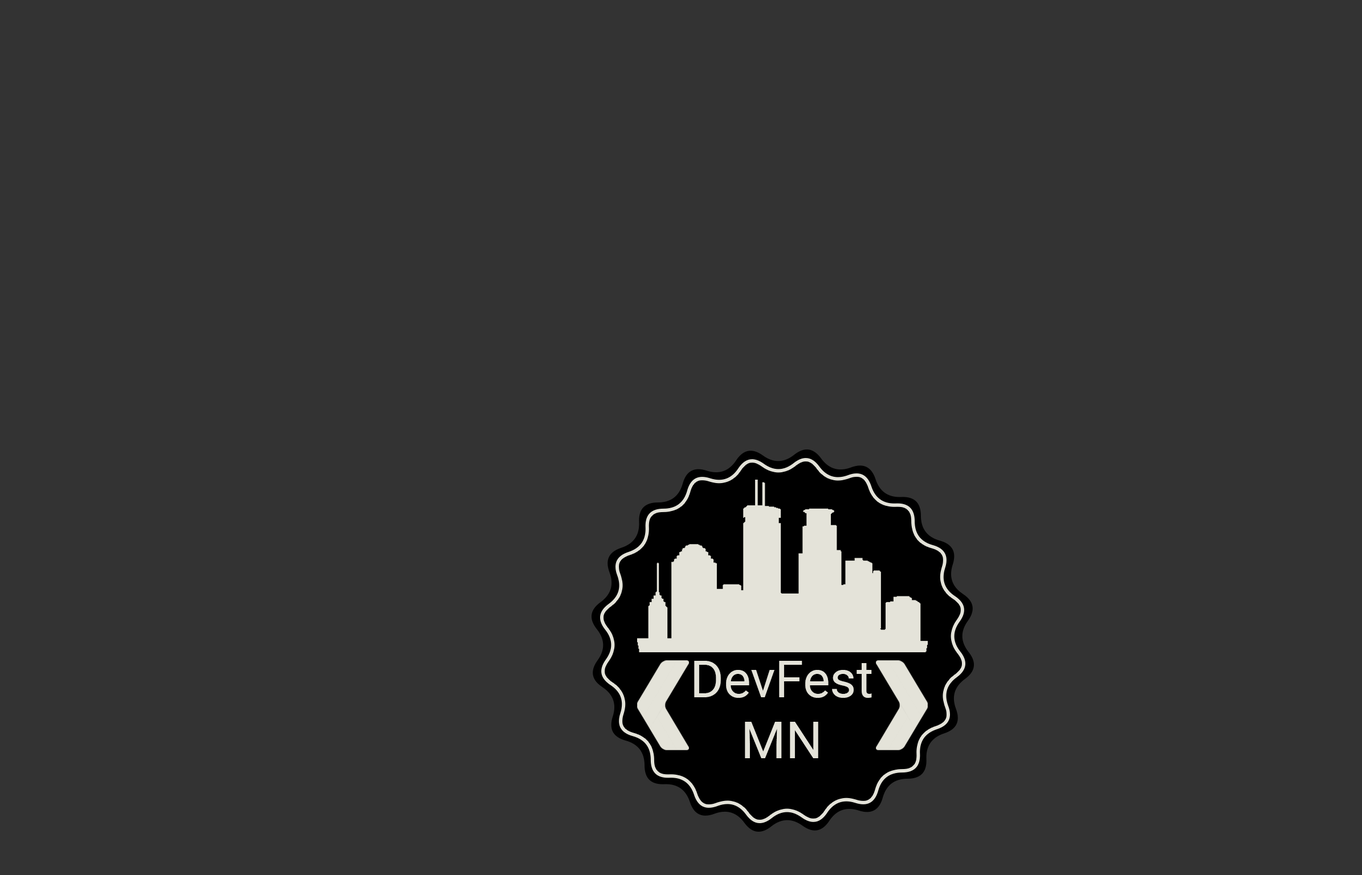
<style>
.page{position:relative;width:1362px;height:875px;background:#333333}
.page>*{position:absolute;margin:0}
.t1{font:51.1px "Roboto-Regular";color:#e4e3d9}
</style>
<div class="page">
<p class="t1" style="left:694px;top:661px;width:178px;height:98px;text-align:center">DevFest<br>MN</p>
</div>
